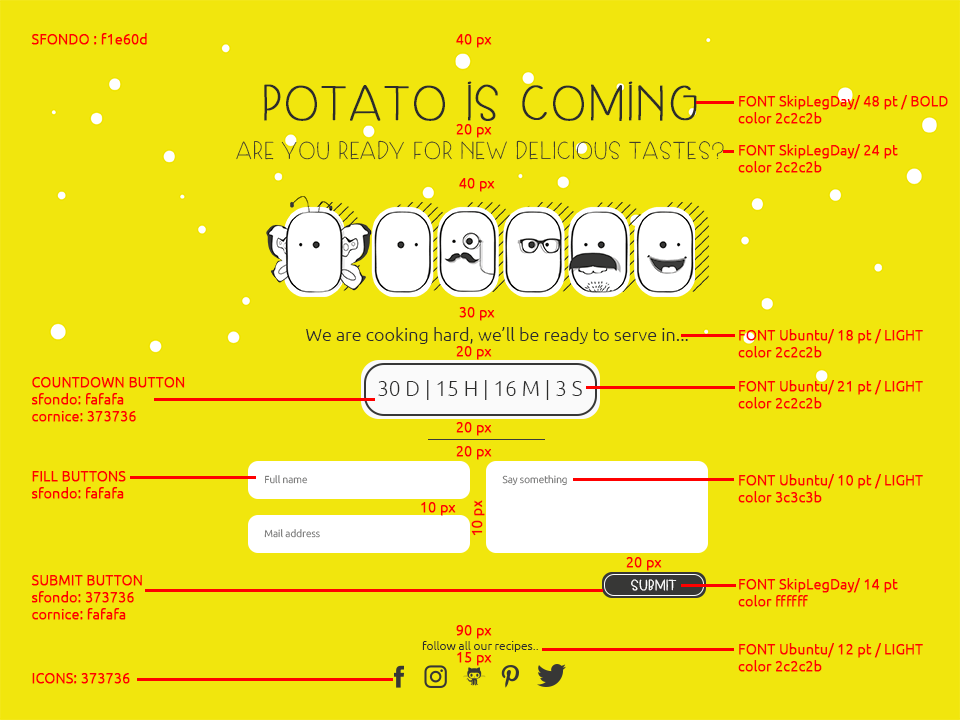
<style>
.page{position:relative;width:960px;height:720px;background:#f1e60d}
.page>*{position:absolute;margin:0}
.t1{font:14px "Ubuntu-Light";color:#ff0000;font-weight:bold}
.t2{font:14px "Ubuntu-Light";color:#ff0202;font-weight:bold}
.t3{font:48px "SkipLegDay";color:#2c2c2b;font-weight:bold}
.t4{font:24px "SkipLegDay"}
.t5{font:18px "Ubuntu-Light";color:#2c2c2b}
.t6{font:21px "Ubuntu-Light";color:#2c2c2b;text-transform:uppercase}
.t7{font:10px "Ubuntu-Light"}
.t8{font:14px "SkipLegDay";color:#ffffff;font-weight:bold}
.t9{font:12px "Ubuntu-Light";color:#2c2c2b}
</style>
<div class="page">
<p class="t1" style="left:31px;top:33px;width:116px;height:12px">SFONDO : f1e60d</p>
<p class="t2" style="left:456px;top:34px;width:36px;height:14px">40 px</p>
<p class="t3" style="left:264px;top:81px;width:433px;height:40px">potato is coming</p>
<p class="t2" style="left:738px;top:95px;width:210px;height:29px">FONT SkipLegDay/ 48 pt / BOLD<br>color 2c2c2b</p>
<p class="t2" style="left:456px;top:124px;width:36px;height:14px">20 px</p>
<p class="t4" style="left:236px;top:140px;width:488px;height:20px">ARE YOU READY FOR NEW DELICIOUS TASTES?</p>
<p class="t2" style="left:738px;top:144px;width:160px;height:29px">FONT SkipLegDay/ 24 pt <br>color 2c2c2b</p>
<p class="t2" style="left:459px;top:178px;width:36px;height:14px">40 px</p>
<p class="t2" style="left:459px;top:307px;width:36px;height:14px">30 px</p>
<p class="t5" style="left:306px;top:327px;width:382px;height:17px">We are cooking hard, we’ll be ready to serve in...</p>
<p class="t2" style="left:738px;top:329px;width:185px;height:29px">FONT Ubuntu/ 18 pt / LIGHT<br>color 2c2c2b</p>
<p class="t2" style="left:456px;top:346px;width:36px;height:14px">20 px</p>
<p class="t1" style="left:32px;top:377px;width:153px;height:45px">COUNTDOWN BUTTON<br>sfondo: fafafa<br>cornice: 373736</p>
<p class="t6" style="left:378px;top:380px;width:204px;height:20px">30 d | 15 H | 16 M | 3 s</p>
<p class="t2" style="left:738px;top:380px;width:185px;height:29px">FONT Ubuntu/ 21 pt / LIGHT<br>color 2c2c2b</p>
<p class="t2" style="left:456px;top:422px;width:36px;height:14px">20 px</p>
<p class="t2" style="left:456px;top:446px;width:36px;height:14px">20 px</p>
<p class="t1" style="left:32px;top:471px;width:94px;height:28px">FILL BUTTONS<br>sfondo: fafafa</p>
<p class="t7" style="left:265px;top:475px;width:43px;height:9px">Full name</p>
<p class="t7" style="left:502px;top:475px;width:65px;height:11px">Say something</p>
<p class="t2" style="left:738px;top:474px;width:185px;height:29px">FONT Ubuntu/ 10 pt / LIGHT<br>color 3c3c3b</p>
<p class="t2" style="left:421px;top:502px;width:35px;height:14px">10 px</p>
<p class="t2" style="left:471px;top:500px;width:14px;height:36px;rotate:-90deg">10 px</p>
<p class="t7" style="left:264px;top:529px;width:56px;height:9px">Mail address</p>
<p class="t2" style="left:626px;top:557px;width:36px;height:14px">20 px</p>
<p class="t1" style="left:31px;top:575px;width:111px;height:45px">SUBMIT BUTTON<br>sfondo: 373736<br>cornice: fafafa</p>
<p class="t8" style="left:631px;top:579px;width:46px;height:12px">SUBMIT</p>
<p class="t2" style="left:738px;top:578px;width:160px;height:29px">FONT SkipLegDay/ 14 pt <br>color ffffff</p>
<p class="t2" style="left:456px;top:625px;width:36px;height:14px">90 px</p>
<p class="t9" style="left:422px;top:641px;width:116px;height:11px">follow all our recipes..</p>
<p class="t2" style="left:457px;top:652px;width:35px;height:14px">15 px</p>
<p class="t2" style="left:738px;top:643px;width:185px;height:29px">FONT Ubuntu/ 12 pt / LIGHT<br>color 2c2c2b</p>
<p class="t1" style="left:32px;top:673px;width:98px;height:11px">ICONS: 373736</p>
</div>
